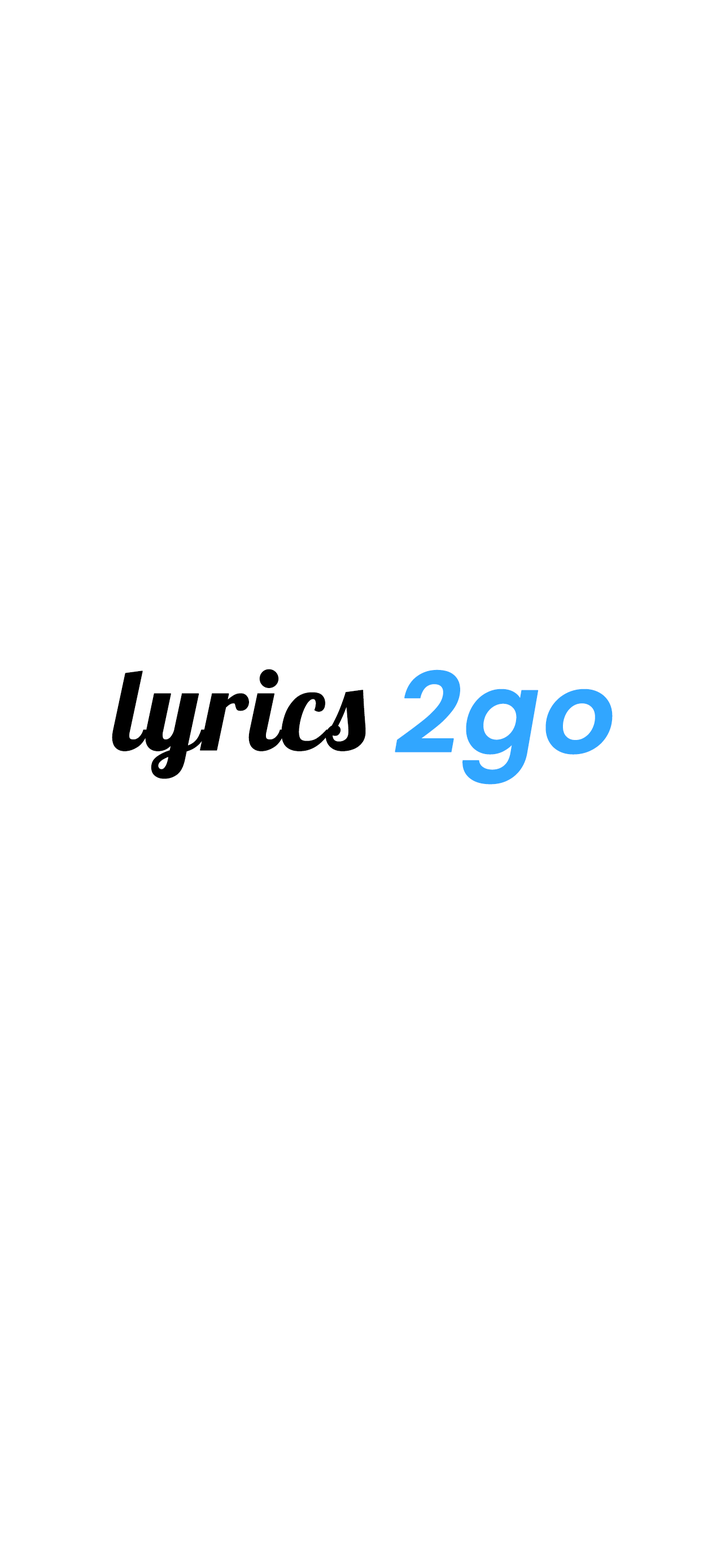
<style>
.page{position:relative;width:725px;height:1568px;background:#ffffff}
.page>*{position:absolute;margin:0}
.t1{font:112.9px "Lobster-Regular";color:#000000;font-weight:bold}
.t2{font:112.9px "Poppins-SemiBoldItalic";color:#31a6ff;font-weight:bold}
</style>
<div class="page">
<p class="t1" style="left:112px;top:669px;width:254px;height:110px">lyrics</p>
<p class="t2" style="left:395px;top:669px;width:217px;height:116px">2go</p>
</div>
